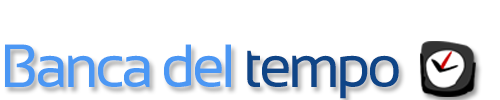
<style>
.page{position:relative;width:500px;height:100px;background:#ffffff}
.page>*{position:absolute;margin:0}
.t1{font:60.8px "Sansation-Regular";letter-spacing:-0.06em;color:#4b97f4}
.t2{font:60.8px "Sansation-Regular";letter-spacing:-0.06em;color:#0f4587}
</style>
<div class="page">
<p class="t1" style="left:5px;top:44px;width:394px;height:55px">Banca del <span class="t2">tempo</span></p>
</div>
